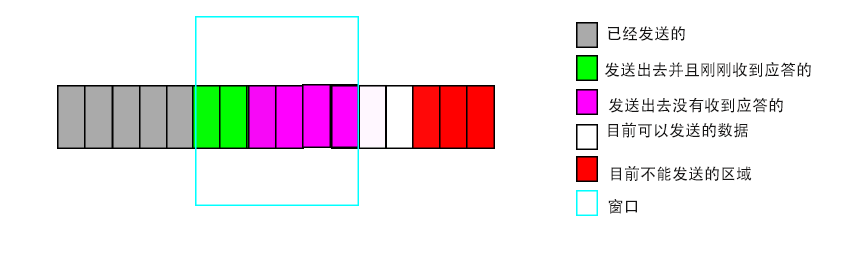
<style>
.page{position:relative;width:852px;height:262px;background:#ffffff}
.page>*{position:absolute;margin:0}
.t1{font:16px "AdobeHeitiStd-Regular";color:#151414}
</style>
<div class="page">
<p class="t1" style="left:608px;top:26px;width:77px;height:15px">已经发送的</p>
<p class="t1" style="left:604px;top:62px;width:207px;height:15px">发送出去并且刚刚收到应答的</p>
<p class="t1" style="left:608px;top:97px;width:175px;height:16px">发送出去没有收到应答的</p>
<p class="t1" style="left:608px;top:122px;width:140px;height:16px">目前可以发送的数据</p>
<p class="t1" style="left:611px;top:166px;width:141px;height:15px">目前不能发送的区域</p>
<p class="t1" style="left:608px;top:199px;width:29px;height:15px">窗口</p>
</div>
